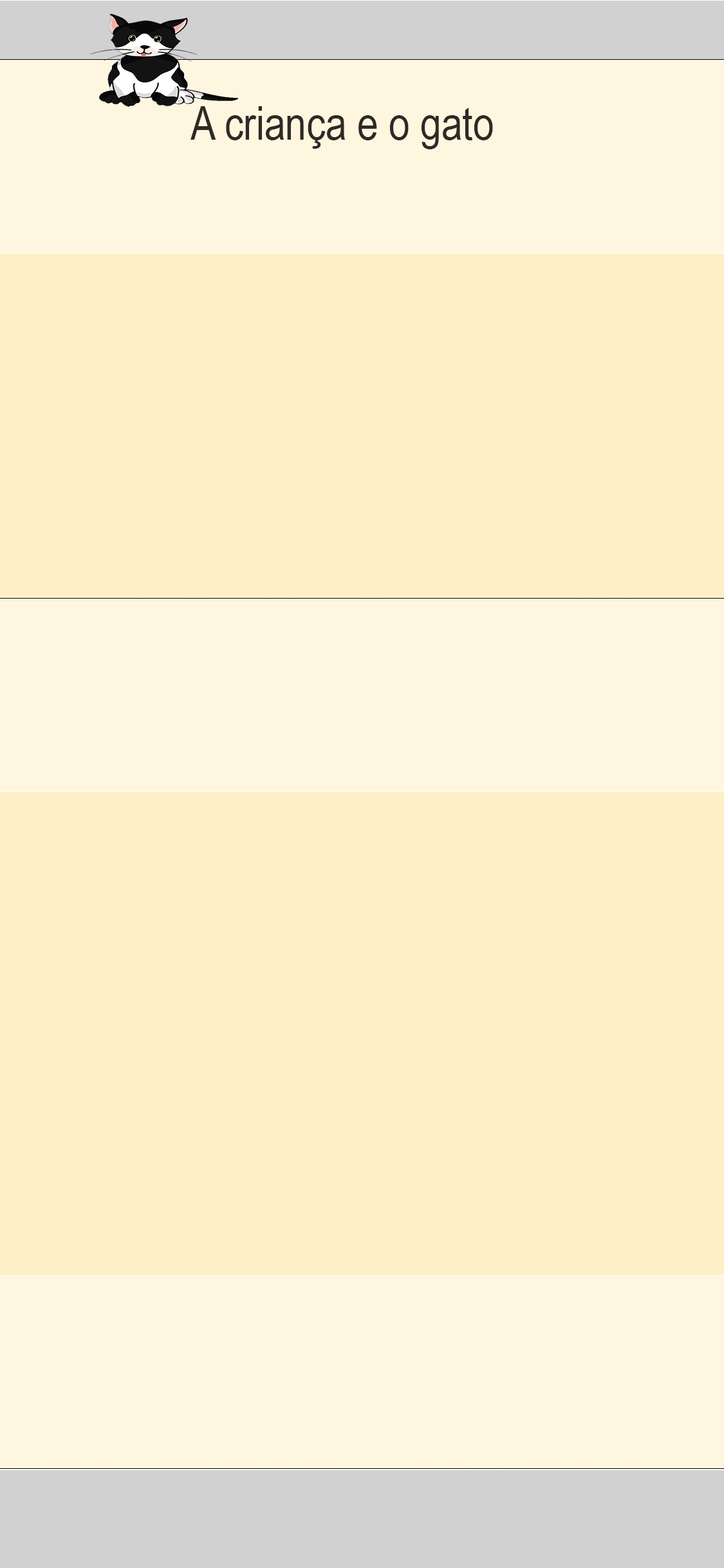
<style>
.page{position:relative;width:724px;height:1568px;background:#ffefc7}
.page>*{position:absolute;margin:0}
.t1{font:46.2px "ArialNarrow";color:#2d2a26}
</style>
<div class="page">
<p class="t1" style="left:191px;top:106px;width:302px;height:43px">A criança e o gato</p>
</div>
